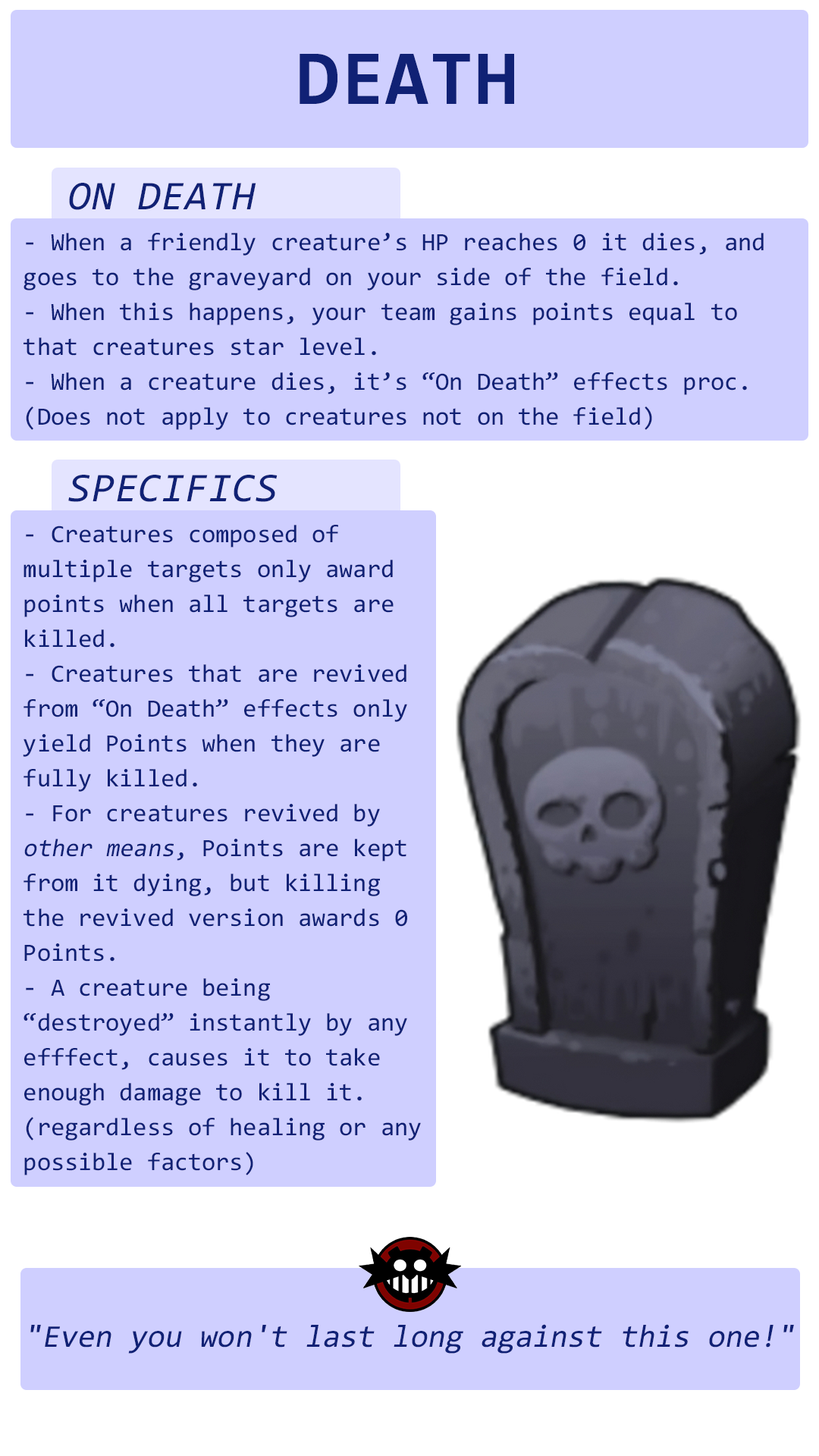
<style>
.page{position:relative;width:819px;height:1456px;background:#cfcfff}
.page>*{position:absolute;margin:0}
.t1{font:78.3px "Consolas-Bold";letter-spacing:0.02em;color:#102175}
.t2{font:41.1px "Consolas-Italic";letter-spacing:0.02em;color:#102175}
.t3{font:25px/34.9px "Consolas";color:#102175}
.t4{font:25px/34.9px "Consolas";color:#102175;font-style:italic}
.t5{font:31.8px "Consolas";color:#102175;font-style:italic}
</style>
<div class="page">
<p class="t1" style="left:300px;top:54px;width:214px;height:50px">DEATH</p>
<p class="t2" style="left:69px;top:183px;width:187px;height:27px">ON DEATH</p>
<p class="t3" style="left:24px;top:233px;width:740px;height:197px">- When a friendly creature’s HP reaches 0 it dies, and goes to the graveyard on your side of the field.<br>- When this happens, your team gains points equal to that creatures star level.<br>- When a creature dies, it’s “On Death” effects proc. (Does not apply to creatures not on the field)</p>
<p class="t2" style="left:68px;top:475px;width:210px;height:27px">SPECIFICS</p>
<p class="t3" style="left:23px;top:525px;width:398px;height:650px">- Creatures composed of multiple targets only award points when all targets are killed.<br>- Creatures that are revived from “On Death” effects only yield Points when they are fully killed.<br>- For creatures revived by <span class="t4">other means</span>, Points are kept from it dying, but killing the revived version awards 0 Points.<br>- A creature being “destroyed” instantly by any efffect, causes it to take enough damage to kill it. (regardless of healing or any possible factors)</p>
<p class="t5" style="left:30px;top:1324px;width:764px;height:30px">"Even you won't last long against this one!"</p>
</div>
